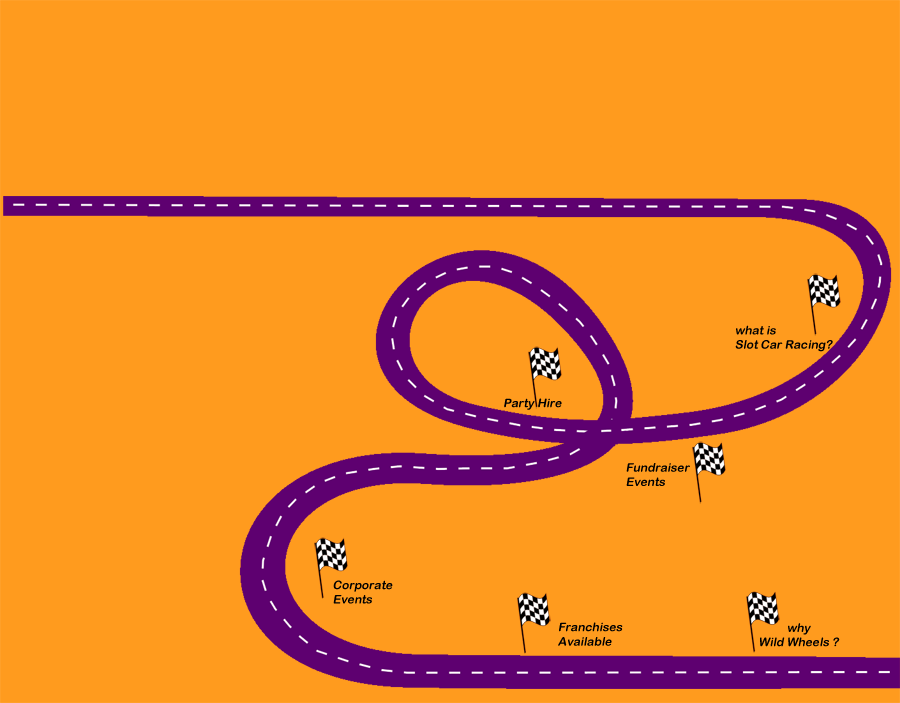
<style>
.page{position:relative;width:900px;height:703px;background:#ff9b1e}
.page>*{position:absolute;margin:0}
.t1{font:12px "ArialRoundedMTBold";color:#000000;font-style:italic}
</style>
<div class="page">
<p class="t1" style="left:735px;top:325px;width:98px;height:27px">what is<br>Slot Car Racing?</p>
<p class="t1" style="left:504px;top:398px;width:58px;height:12px">Party Hire</p>
<p class="t1" style="left:626px;top:463px;width:64px;height:23px">Fundraiser<br>Events</p>
<p class="t1" style="left:333px;top:580px;width:60px;height:24px">Corporate<br>Events</p>
<p class="t1" style="left:558px;top:622px;width:65px;height:24px">Franchises<br>Available</p>
<p class="t1" style="left:760px;top:623px;width:80px;height:24px;text-align:center">why<br>Wild Wheels ?</p>
</div>
